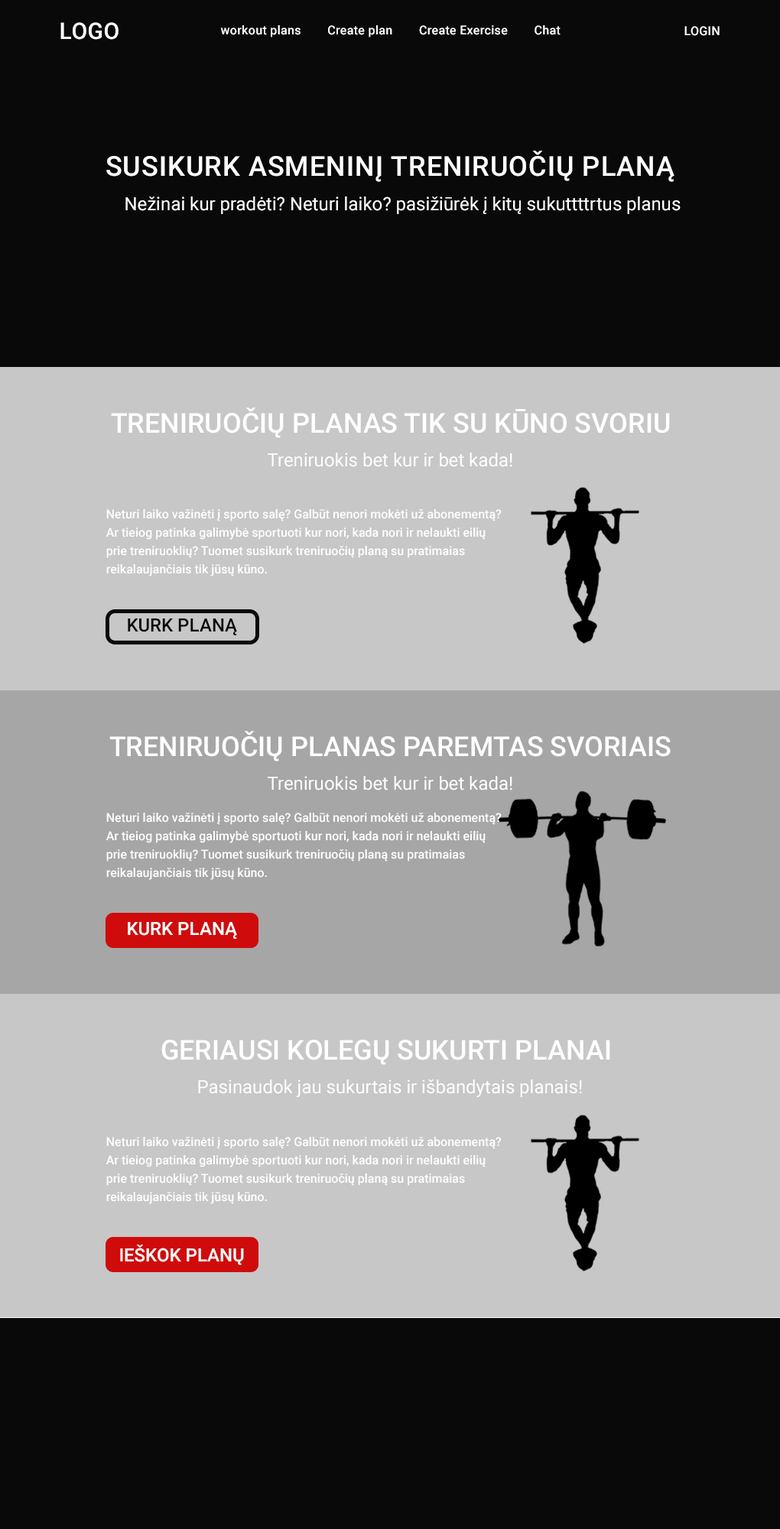
<style>
.page{position:relative;width:780px;height:1529px;background:#c7c7c7}
.page>*{position:absolute;margin:0}
.t1{font:22.9px "Roboto-Medium";letter-spacing:0.02em;color:#ffffff;text-transform:uppercase}
.t2{font:12.2px "Roboto-Medium";letter-spacing:0.02em;color:#ffffff}
.t3{font:12.2px "Roboto-Medium";letter-spacing:0.02em;color:#ffffff;text-transform:uppercase}
.t4{font:27.5px "Roboto-Medium";letter-spacing:0.03em;color:#ffffff;text-transform:uppercase}
.t5{font:18.3px "Roboto-Regular";color:#ffffff}
.t6{font:27.5px "Roboto-Medium";color:#ffffff;text-transform:uppercase}
.t7{font:12.2px/18.3px "Roboto-Medium";color:#ffffff}
.t8{font:18.3px "Roboto-Medium";color:#090909;text-transform:uppercase}
.t9{font:18.3px "Roboto-Medium";color:#fefefe;text-transform:uppercase}
</style>
<div class="page">
<p class="t1" style="left:60px;top:22px;width:59px;height:18px">Logo</p>
<p class="t2" style="left:220px;top:25px;width:340px;height:12px">workout plans        Create plan        Create Exercise        Chat</p>
<p class="t3" style="left:684px;top:26px;width:35px;height:10px">Login</p>
<p class="t4" style="left:106px;top:151px;width:568px;height:31px">Susikurk Asmeninį treniruočių planą</p>
<p class="t5" style="left:125px;top:196px;width:555px;height:18px">Nežinai kur pradėti? Neturi laiko? pasižiūrėk į kitų sukuttttrtus planus</p>
<p class="t6" style="left:111px;top:408px;width:559px;height:30px">Treniruočių Planas Tik Su Kūno Svoriu</p>
<p class="t5" style="left:268px;top:453px;width:244px;height:14px">Treniruokis bet kur ir bet kada!</p>
<p class="t7" style="left:106px;top:509px;width:396px;height:67px">Neturi laiko važinėti į sporto salę? Galbūt nenori mokėti už abonementą? <br>Ar tieiog patinka galimybė sportuoti kur nori, kada nori ir nelaukti eilių <br>prie treniruoklių? Tuomet susikurk treniruočių planą su pratimaias <br>reikalaujančiais tik jūsų kūno.</p>
<p class="t8" style="left:128px;top:619px;width:109px;height:16px">KURk Planą</p>
<p class="t6" style="left:109px;top:731px;width:562px;height:30px">Treniruočių Planas paremtas svoriais</p>
<p class="t5" style="left:268px;top:776px;width:244px;height:15px">Treniruokis bet kur ir bet kada!</p>
<p class="t7" style="left:106px;top:813px;width:396px;height:67px">Neturi laiko važinėti į sporto salę? Galbūt nenori mokėti už abonementą? <br>Ar tieiog patinka galimybė sportuoti kur nori, kada nori ir nelaukti eilių <br>prie treniruoklių? Tuomet susikurk treniruočių planą su pratimaias <br>reikalaujančiais tik jūsų kūno.</p>
<p class="t9" style="left:128px;top:922px;width:109px;height:17px">Kurk Planą</p>
<p class="t6" style="left:161px;top:1040px;width:449px;height:25px">Geriausi kolegų sukurti planai</p>
<p class="t5" style="left:198px;top:1080px;width:384px;height:17px">Pasinaudok jau sukurtais ir išbandytais planais!</p>
<p class="t7" style="left:106px;top:1137px;width:396px;height:67px">Neturi laiko važinėti į sporto salę? Galbūt nenori mokėti už abonementą? <br>Ar tieiog patinka galimybė sportuoti kur nori, kada nori ir nelaukti eilių <br>prie treniruoklių? Tuomet susikurk treniruočių planą su pratimaias <br>reikalaujančiais tik jūsų kūno.</p>
<p class="t9" style="left:120px;top:1245px;width:124px;height:20px">Ieškok planų</p>
</div>
